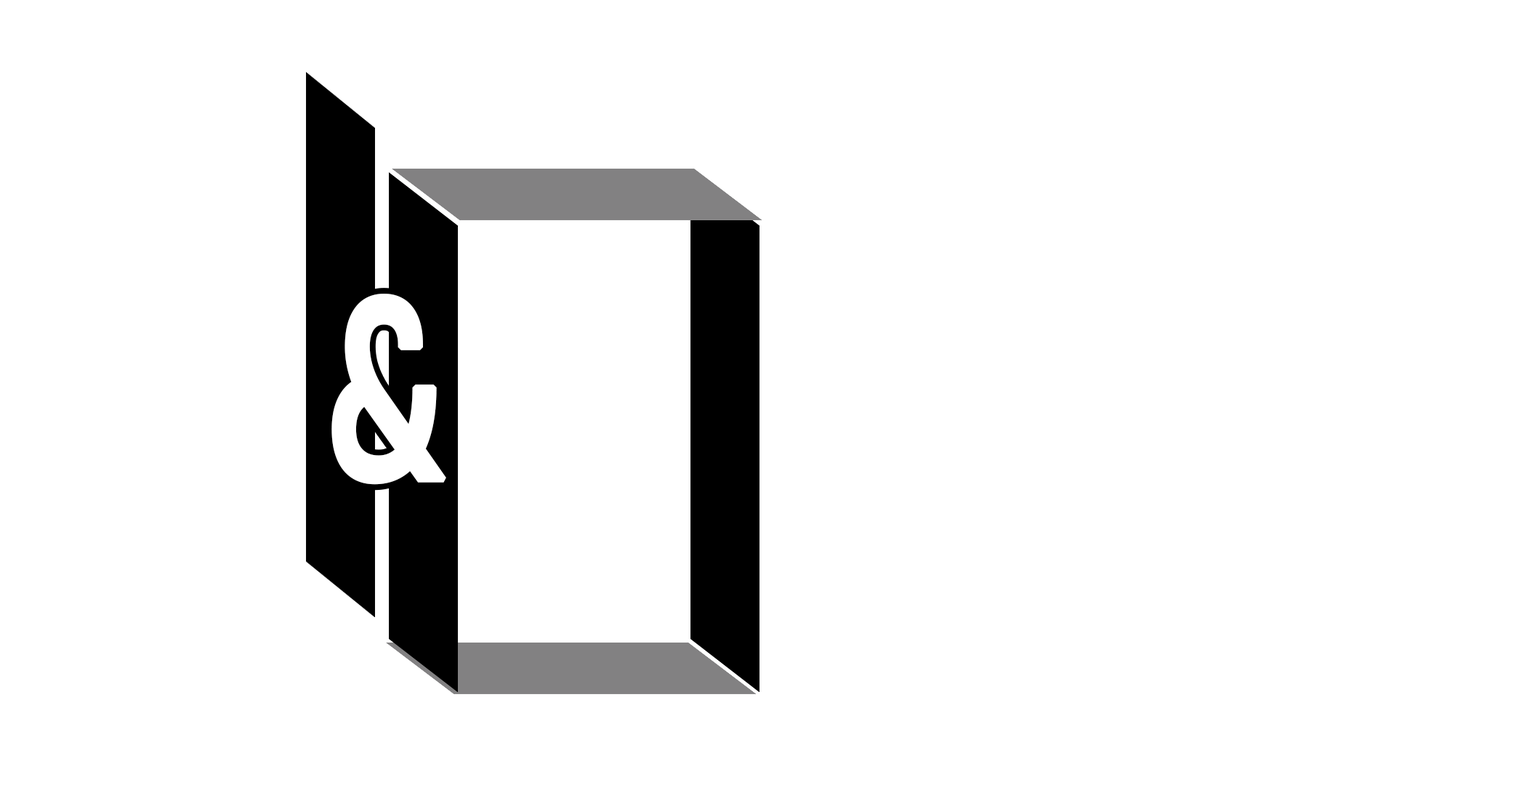
<style>
.page{position:relative;width:1519px;height:785px;background:#ffffff}
.page>*{position:absolute;margin:0}
.t1{font:255.1px "Bahnschrift";letter-spacing:0.031em;color:#ffffff;font-weight:bold;scale:0.74 1}
</style>
<div class="page">
<p class="t1" style="left:331px;top:294px;width:115px;height:191px">&amp;</p>
</div>
